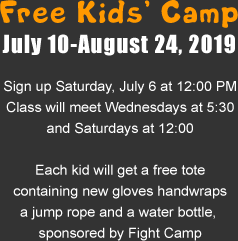
<style>
.page{position:relative;width:238px;height:241px;background:#333333}
.page>*{position:absolute;margin:0}
.t1{font:23px/30.4px "Impact";letter-spacing:0.04em;color:#ffffff}
.t2{font:48.9px/25.4px "Life-is-goofy";letter-spacing:0.04em;color:#ff9900}
.t3{font:14px/21px "ArialMT";color:#ffffff}
.t4{font:14px/21px "ArialMT";color:#ffffff;text-transform:uppercase}
</style>
<div class="page">
<p class="t1" style="left:0px;top:0px;width:238px;height:56px;text-align:center"><span class="t2">Free Kids’ Camp<br></span>July 10-August 24, 2019</p>
<p class="t3" style="left:4px;top:80px;width:232px;height:161px;text-align:center"><span class="t4"><br>S</span>ign up Saturday, July 6 at 12:00 PM<br>Class will meet Wednesdays at 5:30<br>and Saturdays at 12:00<br><br>Each kid will get a free tote<br>containing new gloves handwraps<br>a jump rope and a water bottle, <br>sponsored by Fight Camp</p>
</div>
